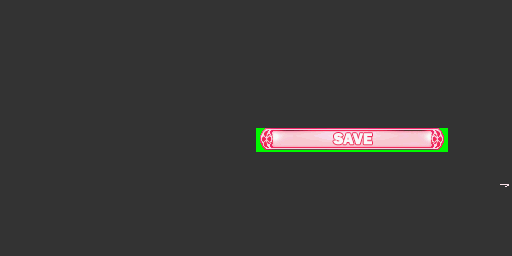
<style>
.page{position:relative;width:512px;height:256px;background:#333333}
.page>*{position:absolute;margin:0}
.t1{font:16px "FranklinGothic-Heavy";color:#f8f8f8;text-transform:uppercase}
</style>
<div class="page">
<p class="t1" style="left:333px;top:133px;width:39px;height:12px">Save</p>
</div>
